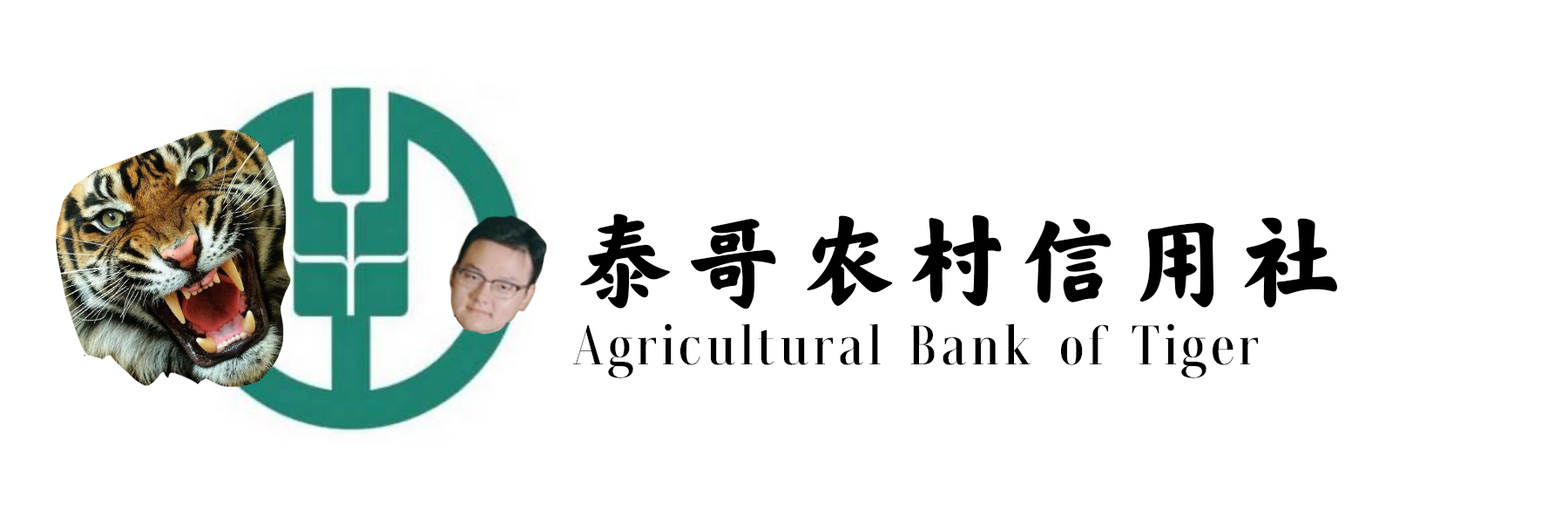
<style>
.page{position:relative;width:1568px;height:523px;background:#ffffff}
.page>*{position:absolute;margin:0}
.t1{font:101.1px "COCA-COLACAREFONTKAITI--GB1-0";letter-spacing:0.1em;color:#000000}
.t2{font:49.6px "HYRuiYiSongW";letter-spacing:0.1em;color:#000000}
</style>
<div class="page">
<p class="t1" style="left:580px;top:213px;width:758px;height:96px">泰哥农村信用社</p>
<p class="t2" style="left:573px;top:323px;width:685px;height:55px">Agricultural Bank of Tiger</p>
</div>
